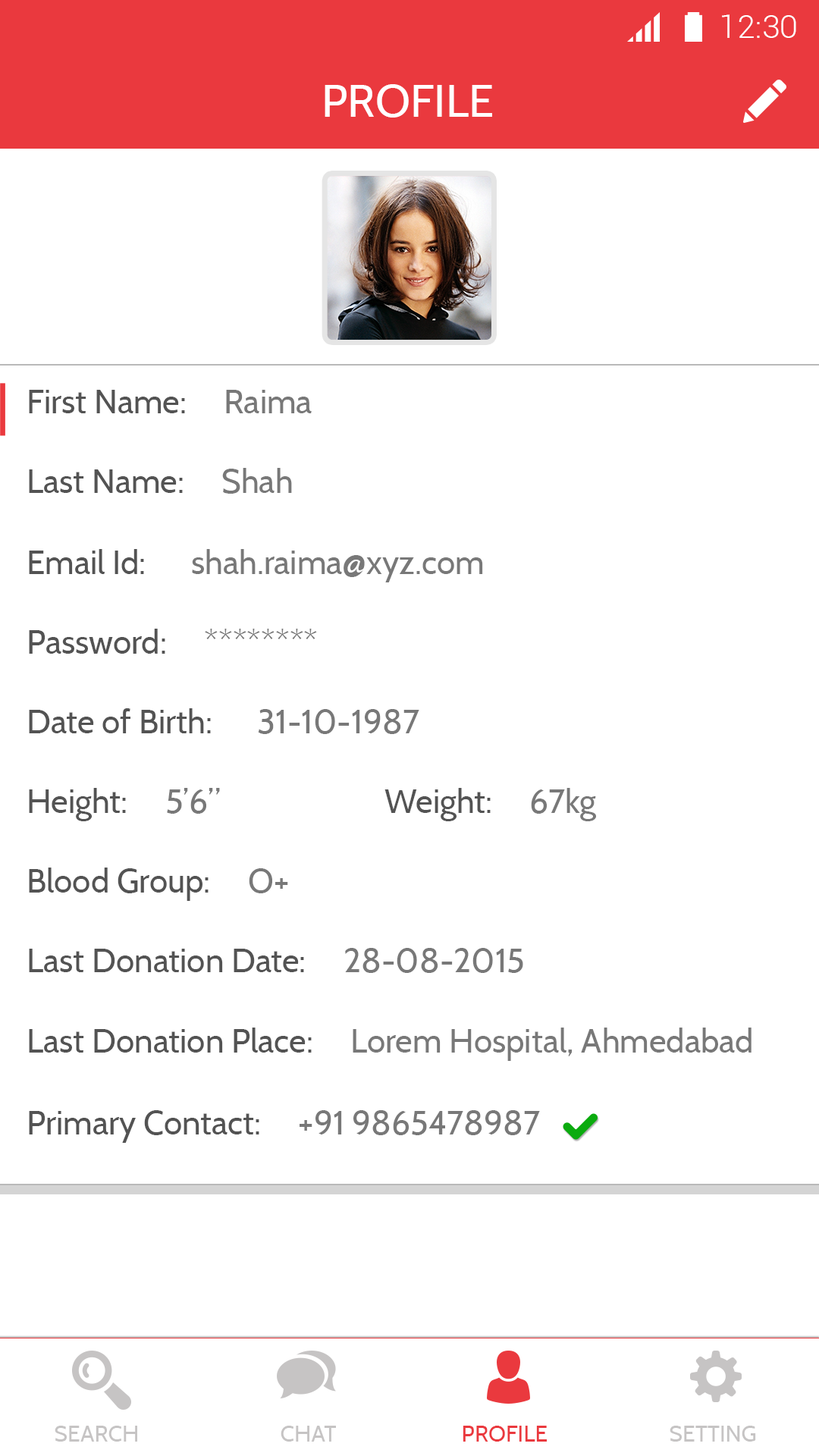
<style>
.page{position:relative;width:819px;height:1456px;background:#ffffff}
.page>*{position:absolute;margin:0}
.t1{font:32.3px "Roboto-Light";color:#ffffff}
.t2{font:45.5px "Cabin-Regular";color:#ffffff}
.t3{font:33.3px "Cabin-Regular";color:#535353}
.t4{font:33.3px "Cabin-Regular";color:#787878}
.t5{font:22.7px "Cabin-Regular";color:#c6c4c4}
.t6{font:22.7px "Cabin-Regular";color:#ea393e}
</style>
<div class="page">
<p class="t1" style="left:722px;top:14px;width:74px;height:24px">12:30</p>
<p class="t2" style="left:325px;top:84px;width:167px;height:34px">PROFILE</p>
<p class="t3" style="left:29px;top:390px;width:283px;height:23px">First Name:     <span class="t4">Raima</span></p>
<p class="t3" style="left:29px;top:468px;width:263px;height:26px">Last Name:     <span class="t4">Shah</span></p>
<p class="t4" style="left:29px;top:549px;width:454px;height:33px"><span class="t3">Email Id:      </span>shah.raima@xyz.com</p>
<p class="t3" style="left:29px;top:629px;width:288px;height:25px">Password:     <span class="t4">********</span></p>
<p class="t3" style="left:29px;top:708px;width:390px;height:26px">Date of Birth:      <span class="t4">31-10-1987</span></p>
<p class="t3" style="left:29px;top:788px;width:191px;height:33px">Height:     <span class="t4">5’6”</span></p>
<p class="t3" style="left:384px;top:788px;width:212px;height:33px">Weight:     <span class="t4">67kg</span></p>
<p class="t3" style="left:29px;top:868px;width:259px;height:33px">Blood Group:     <span class="t4">O+</span></p>
<p class="t3" style="left:29px;top:948px;width:494px;height:25px">Last Donation Date:     <span class="t4">28-08-2015</span></p>
<p class="t4" style="left:29px;top:1028px;width:722px;height:33px"><span class="t3">Last Donation Place:     </span>Lorem Hospital, Ahmedabad</p>
<p class="t3" style="left:29px;top:1110px;width:511px;height:33px">Primary Contact:     <span class="t4">+91 9865478987</span></p>
<p class="t5" style="left:55px;top:1426px;width:82px;height:16px">SEARCH</p>
<p class="t5" style="left:281px;top:1426px;width:55px;height:16px">CHAT</p>
<p class="t6" style="left:463px;top:1426px;width:84px;height:16px">PROFILE</p>
<p class="t5" style="left:670px;top:1426px;width:86px;height:16px">SETTING</p>
</div>
